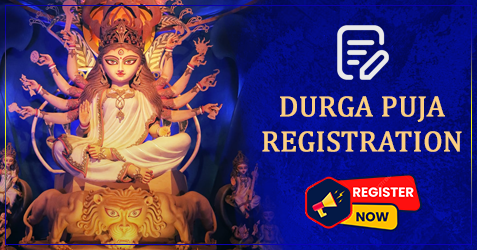
<style>
.page{position:relative;width:477px;height:250px}
.page>*{position:absolute;margin:0}
.t1{font:29.1px "Cambria";color:#fccf7f;text-transform:uppercase;font-weight:bold}
</style>
<div class="page">
<p class="t1" style="left:262px;top:96px;width:200px;height:56px;text-align:center">Durga Puja<br>RegistratioN</p>
</div>
